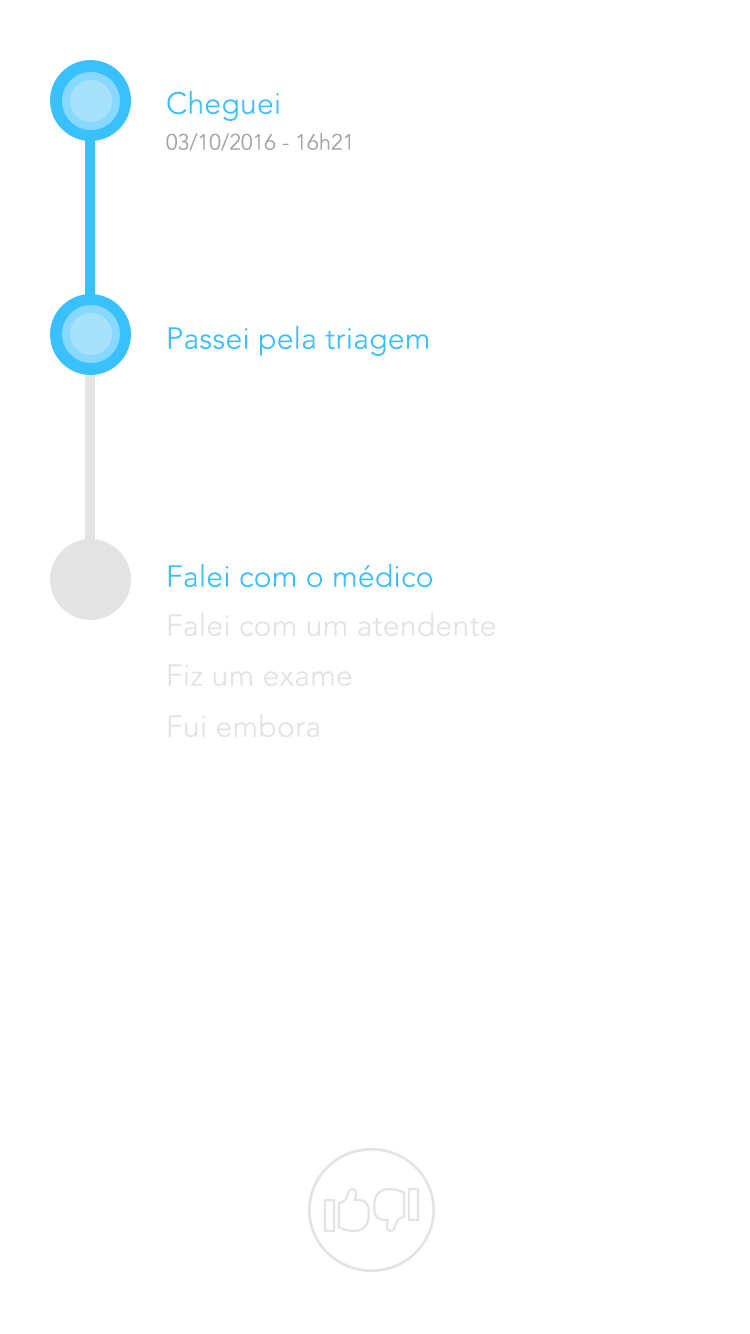
<style>
.page{position:relative;width:750px;height:1334px;background:#ffffff}
.page>*{position:absolute;margin:0}
.t1{font:30px "AvenirLTStd-Light";letter-spacing:0.01em;color:#39c0ff}
.t2{font:22px "AvenirLTStd-Light";letter-spacing:0.01em;color:#a3a4a4}
.t3{font:30px "AvenirLTStd-Light";letter-spacing:0.01em;color:#e3e3e3}
</style>
<div class="page">
<p class="t1" style="left:167px;top:90px;width:112px;height:31px">Cheguei</p>
<p class="t2" style="left:166px;top:132px;width:184px;height:19px">03/10/2016 - 16h21</p>
<p class="t1" style="left:168px;top:325px;width:260px;height:31px">Passei pela triagem</p>
<p class="t1" style="left:168px;top:563px;width:264px;height:25px">Falei com o médico</p>
<p class="t3" style="left:168px;top:612px;width:327px;height:25px">Falei com um atendente</p>
<p class="t3" style="left:168px;top:664px;width:184px;height:23px">Fiz um exame</p>
<p class="t3" style="left:168px;top:713px;width:151px;height:25px">Fui embora</p>
</div>
